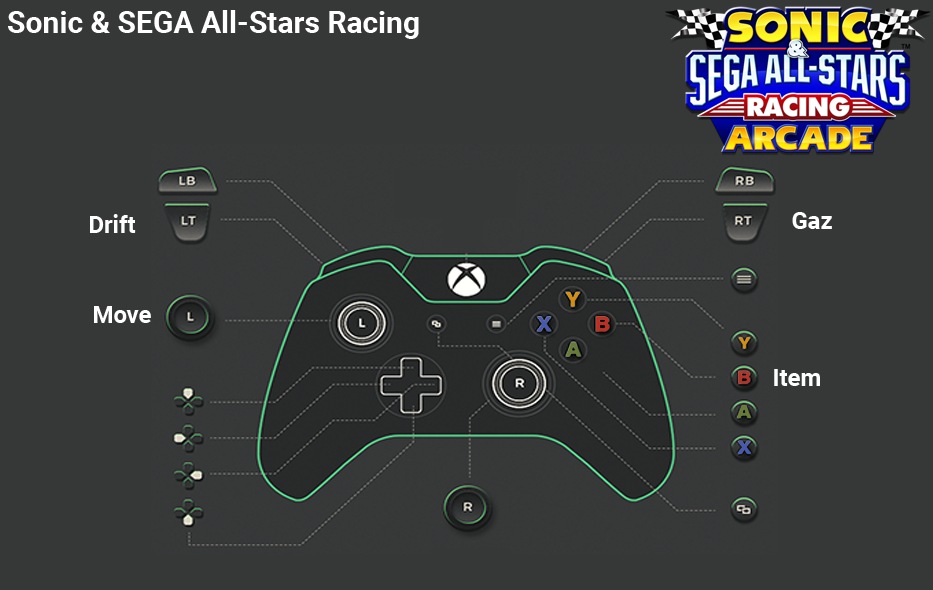
<style>
.page{position:relative;width:933px;height:590px;background:#363838}
.page>*{position:absolute;margin:0}
.t1{font:30px "Roboto-Bold";color:#ffffff}
.t2{font:24px "Roboto-Bold";color:#ffffff}
</style>
<div class="page">
<p class="t1" style="left:8px;top:10px;width:411px;height:29px">Sonic &amp; SEGA All-Stars Racing</p>
<p class="t2" style="left:90px;top:214px;width:46px;height:19px">Drift</p>
<p class="t2" style="left:792px;top:212px;width:40px;height:17px">Gaz</p>
<p class="t2" style="left:94px;top:306px;width:57px;height:17px">Move</p>
<p class="t2" style="left:774px;top:369px;width:46px;height:17px">Item</p>
</div>
